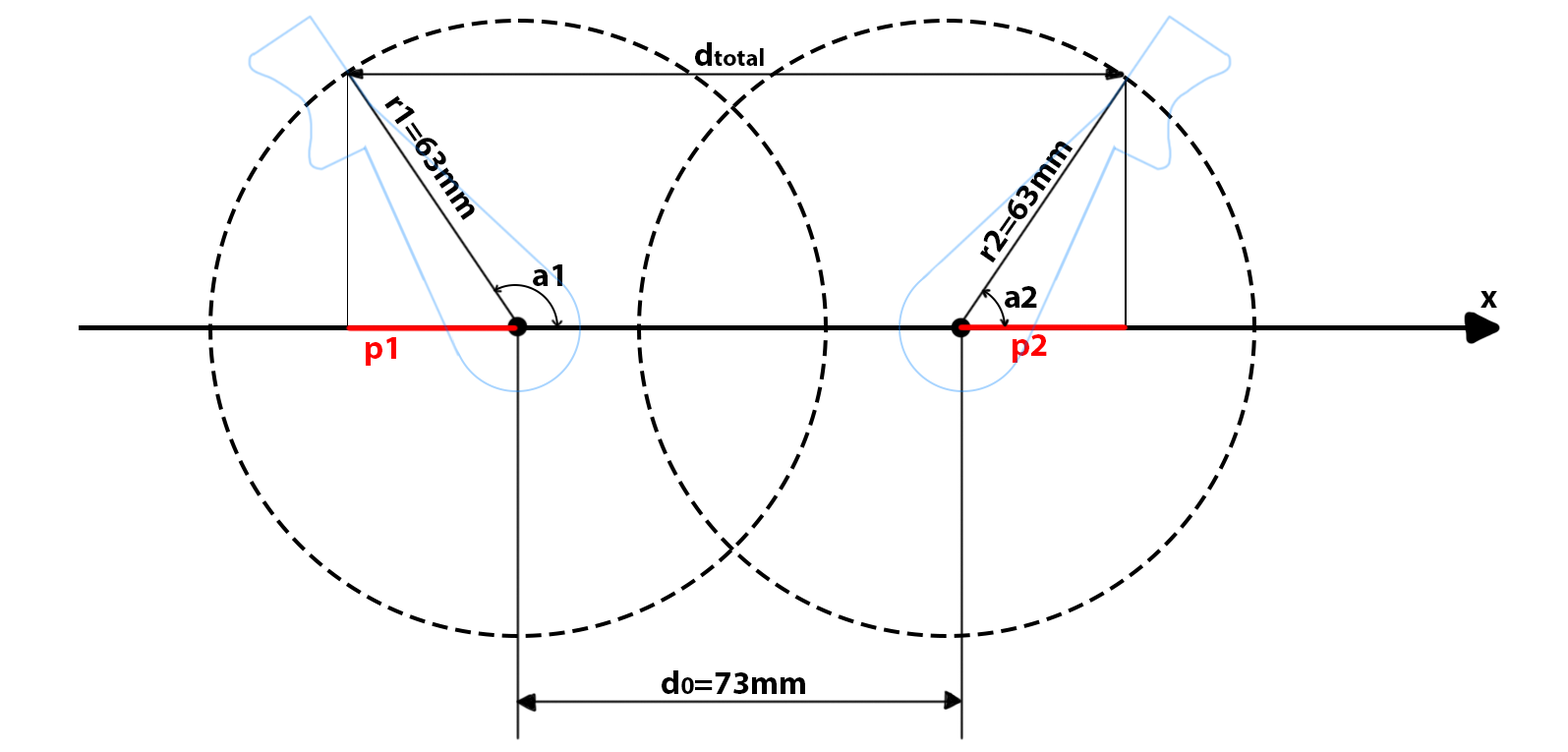
<style>
.page{position:relative;width:1568px;height:752px;background:#ffffff}
.page>*{position:absolute;margin:0}
.t1{font:24.6px "MyriadPro-Bold";color:#000000}
.t2{font:32.8px "MyriadPro-Bold";color:#000000}
.t3{font:32.8px "MyriadPro-Bold";color:#ff0000}
</style>
<div class="page">
<p class="t1" style="left:695px;top:42px;width:69px;height:24px"><span class="t2">d</span>total</p>
<p class="t2" style="left:384px;top:95px;width:91px;height:125px;rotate:55deg">r1=63mm</p>
<p class="t2" style="left:979px;top:141px;width:95px;height:122px;rotate:-55deg">r2=63mm</p>
<p class="t2" style="left:533px;top:264px;width:29px;height:22px">a1</p>
<p class="t2" style="left:1005px;top:286px;width:32px;height:22px">a2</p>
<p class="t2" style="left:1481px;top:291px;width:16px;height:17px">x</p>
<p class="t3" style="left:366px;top:337px;width:30px;height:29px">p1</p>
<p class="t3" style="left:1013px;top:334px;width:34px;height:29px">p2</p>
<p class="t2" style="left:662px;top:670px;width:143px;height:24px">d<span class="t1">0</span>=73mm</p>
</div>
